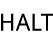
<style>
.page{position:relative;width:53px;height:41px;background:#ffffff}
.page>*{position:absolute;margin:0}
.t1{font:23.7px "DroidSans";color:#000000}
</style>
<div class="page">
<p class="t1" style="left:1px;top:13px;width:52px;height:18px">HALT</p>
</div>
